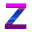
<style>
.page{position:relative;width:32px;height:32px;background:#ffffff}
.page>*{position:absolute;margin:0}
.t1{font:36px "HelveticaNeue-Bold"}
</style>
<div class="page">
<p class="t1" style="left:4px;top:3px;width:23px;height:26px">Z</p>
</div>
